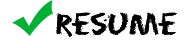
<style>
.page{position:relative;width:188px;height:48px;background:#ffffff}
.page>*{position:absolute;margin:0}
.t1{font:27.5px "Eraser-Regular";color:#000000}
</style>
<div class="page">
<p class="t1" style="left:56px;top:12px;width:121px;height:25px">resume</p>
<p class="t1" style="left:56px;top:12px;width:121px;height:25px">resume</p>
</div>
